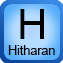
<style>
.page{position:relative;width:63px;height:63px}
.page>*{position:absolute;margin:0}
.t1{font:41.7px "ArialMT";color:#000000}
.t2{font:12.5px "ArialMT";color:#000000}
</style>
<div class="page">
<p class="t1" style="left:20px;top:9px;width:24px;height:30px">H</p>
<p class="t2" style="left:8px;top:45px;width:47px;height:10px">Hitharan</p>
</div>
